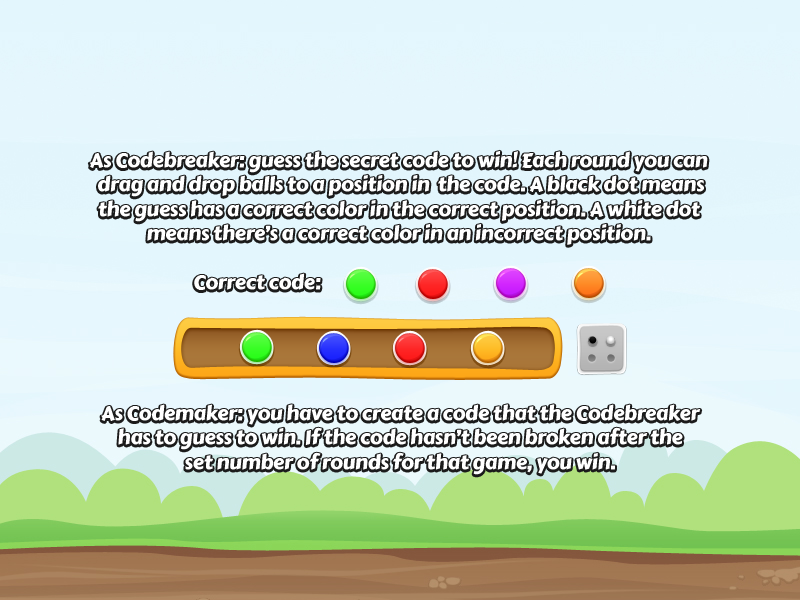
<style>
.page{position:relative;width:800px;height:600px}
.page>*{position:absolute;margin:0}
.t1{font:20.3px "CarterOne";letter-spacing:-0.02em;color:#ffffff}
</style>
<div class="page">
<p class="t1" style="left:89px;top:150px;width:619px;height:95px;text-align:center">As Codebreaker: guess the secret code to win! Each round you can <br>drag and drop balls to a position in  the code. A black dot means<br>the guess has a correct color in the correct position. A white dot <br>means there’s a correct color in an incorrect position.</p>
<p class="t1" style="left:194px;top:273px;width:127px;height:17px">Correct code:</p>
<p class="t1" style="left:101px;top:404px;width:600px;height:71px;text-align:center">As Codemaker: you have to create a code that the Codebreaker<br>has to guess to win. If the code hasn’t been broken after the<br>set number of rounds for that game, you win.</p>
</div>
